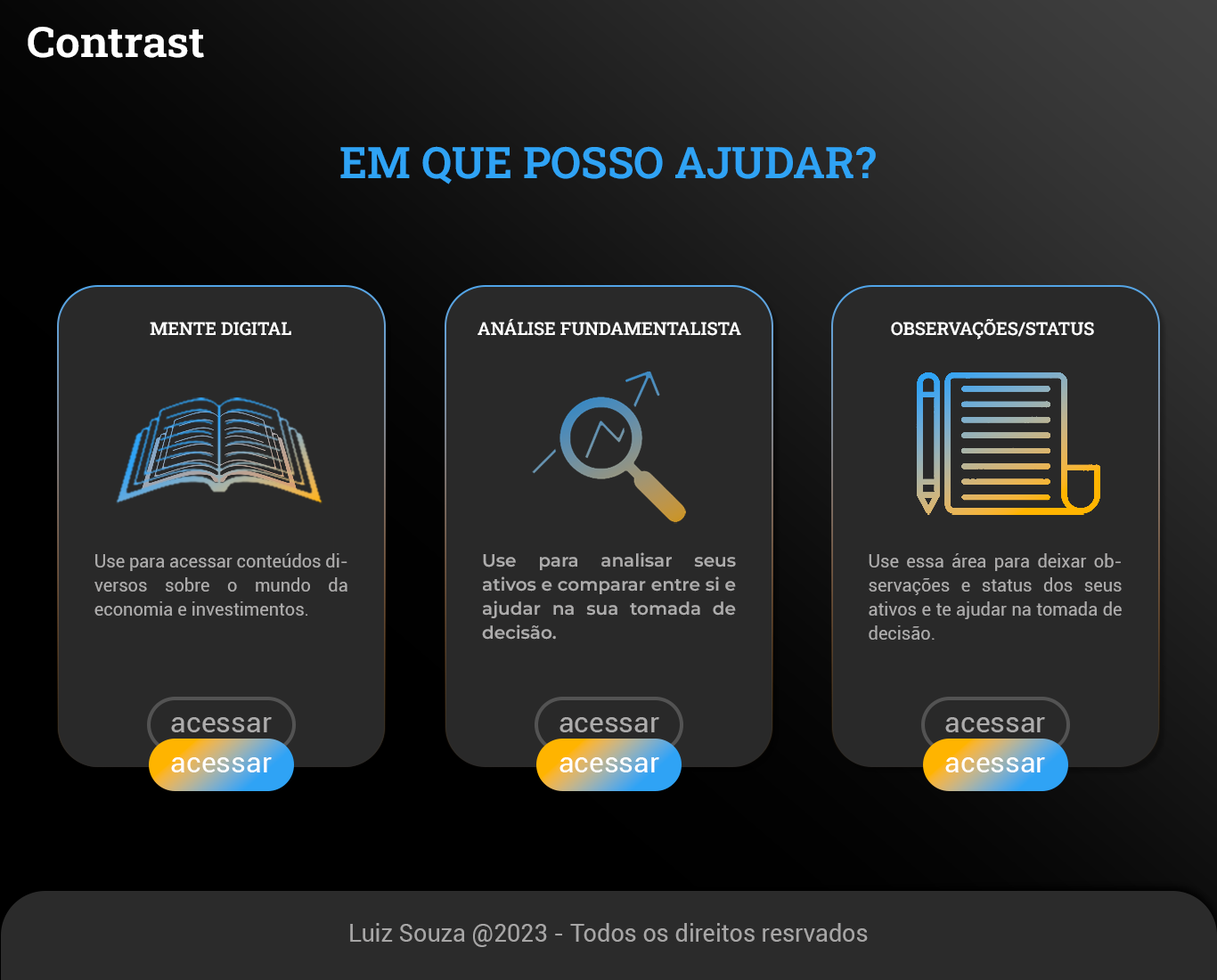
<style>
.page{position:relative;width:1217px;height:980px;background:#292929}
.page>*{position:absolute;margin:0}
.t1{font:41.9px "RobotoSlab-SemiBold";color:#ffffff;scale:1.06 1}
.t2{font:43.4px "RobotoSlab-SemiBold";color:#2fa3f5;text-transform:uppercase}
.t3{font:17.8px "RobotoSlab-SemiBold";color:#ffffff}
.t4{font:17.8px/24.1px "Roboto-Regular";color:#adacac}
.t5{font:17.8px/24.1px "Montserrat-SemiBold";color:#adacac}
.t6{font:28.5px "Roboto-Regular";color:#adacac}
.t7{font:28.5px "Roboto-Regular";color:#ffffff}
.t8{font:24px "Roboto-Regular";color:#a7a6a6}
</style>
<div class="page">
<p class="t1" style="left:28px;top:27px;width:176px;height:31px">Contrast</p>
<p class="t2" style="left:340px;top:146px;width:536px;height:38px">Em que posso ajudar?</p>
<p class="t3" style="left:150px;top:322px;width:141px;height:14px">MENTE DIGITAL</p>
<p class="t3" style="left:477px;top:319px;width:264px;height:17px">ANÁLISE FUNDAMENTALISTA</p>
<p class="t3" style="left:891px;top:318px;width:203px;height:21px">OBSERVAÇÕES/STATUS</p>
<p class="t4" style="left:94px;top:553px;width:253px;height:63px;text-align:justify">Use para acessar conteúdos diversos sobre o mundo da economia e investimentos.</p>
<p class="t5" style="left:482px;top:552px;width:254px;height:88px;text-align:justify">Use para analisar seus ativos e comparar entre si e ajudar na sua tomada de decisão.</p>
<p class="t4" style="left:869px;top:553px;width:253px;height:87px;text-align:justify">Use essa área para deixar observações e status dos seus ativos e te ajudar na tomada de decisão.</p>
<p class="t6" style="left:171px;top:717px;width:101px;height:15px">acessar</p>
<p class="t6" style="left:559px;top:717px;width:100px;height:15px">acessar</p>
<p class="t6" style="left:945px;top:717px;width:100px;height:15px">acessar</p>
<p class="t7" style="left:171px;top:757px;width:101px;height:15px">acessar</p>
<p class="t7" style="left:559px;top:757px;width:100px;height:15px">acessar</p>
<p class="t7" style="left:945px;top:757px;width:100px;height:15px">acessar</p>
<p class="t8" style="left:350px;top:923px;width:518px;height:24px">Luiz Souza @2023 - Todos os direitos resrvados</p>
</div>
